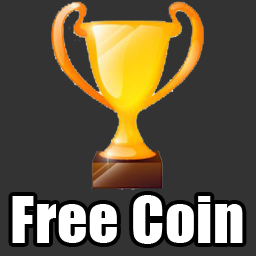
<style>
.page{position:relative;width:256px;height:256px;background:#333333}
.page>*{position:absolute;margin:0}
.t1{font:60px "Impact";letter-spacing:0.012em;color:#ffffff}
</style>
<div class="page">
<p class="t1" style="left:12px;top:195px;width:231px;height:49px">Free Coin</p>
</div>
